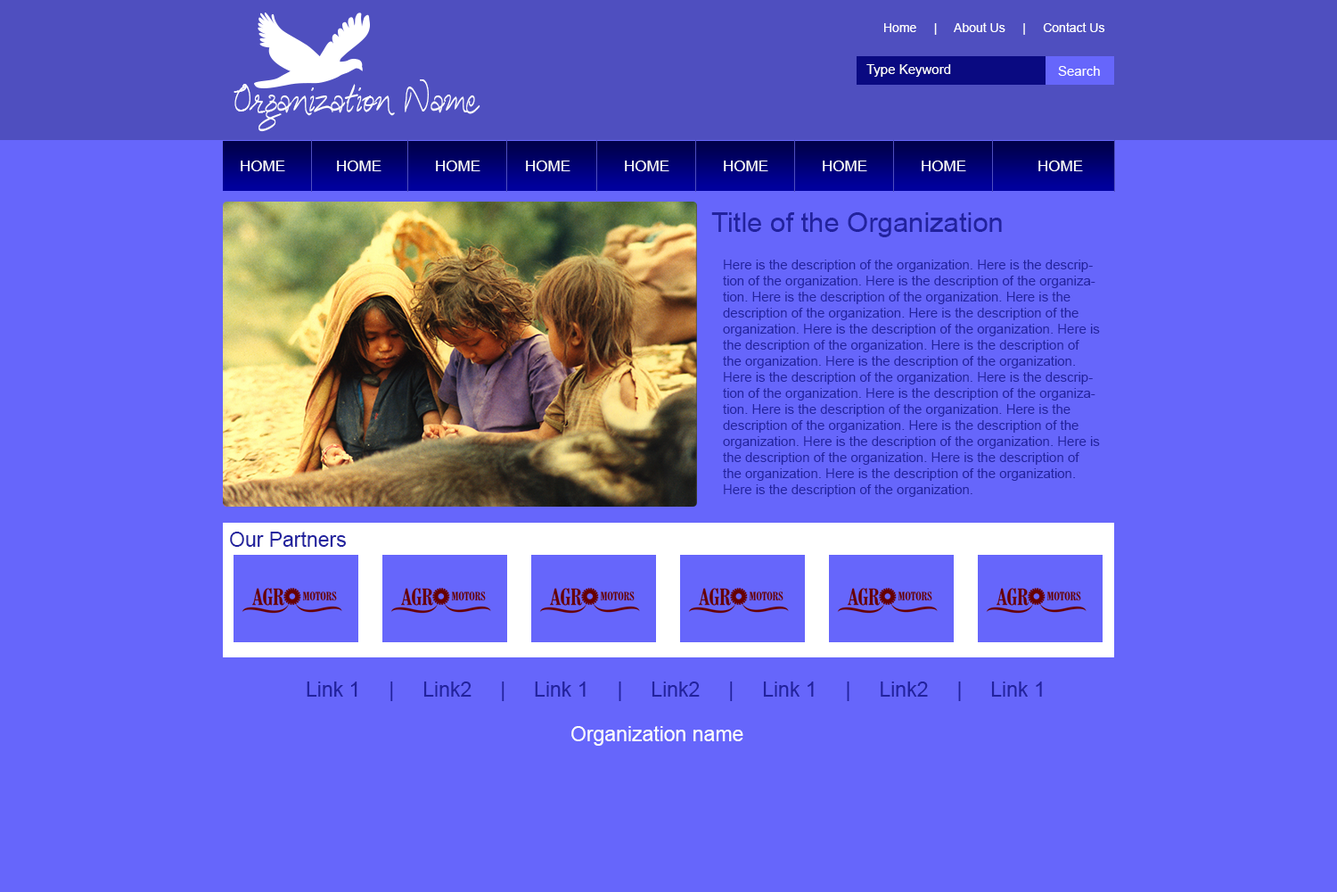
<style>
.page{position:relative;width:1337px;height:892px;background:#6666fb}
.page>*{position:absolute;margin:0}
.t1{font:12.5px "ArialMT";color:#fefefe}
.t2{font:13.4px "ArialMT";color:#fefefe}
.t3{font:32.1px "AnandaHastakchyar";color:#fefefe}
.t4{font:15.2px "ArialMT";color:#fefefe}
.t5{font:27.6px "ArialMT";color:#22229e}
.t6{font:13.4px "ArialMT";color:#22229e}
.t7{font:20.5px "ArialMT";color:#22229e}
.t8{font:20.5px "ArialMT";color:#fafafb}
</style>
<div class="page">
<p class="t1" style="left:884px;top:22px;width:222px;height:13px">Home     |     About Us     |     Contact Us</p>
<p class="t2" style="left:867px;top:64px;width:84px;height:13px">Type Keyword</p>
<p class="t2" style="left:1058px;top:66px;width:42px;height:10px">Search</p>
<p class="t3" style="left:234px;top:79px;width:247px;height:53px">Organization Name</p>
<p class="t4" style="left:241px;top:160px;width:44px;height:11px">HOME</p>
<p class="t4" style="left:337px;top:160px;width:45px;height:11px">HOME</p>
<p class="t4" style="left:436px;top:160px;width:45px;height:11px">HOME</p>
<p class="t4" style="left:526px;top:160px;width:45px;height:11px">HOME</p>
<p class="t4" style="left:625px;top:160px;width:45px;height:11px">HOME</p>
<p class="t4" style="left:724px;top:160px;width:45px;height:11px">HOME</p>
<p class="t4" style="left:823px;top:160px;width:45px;height:11px">HOME</p>
<p class="t4" style="left:922px;top:160px;width:44px;height:11px">HOME</p>
<p class="t4" style="left:1039px;top:160px;width:44px;height:11px">HOME</p>
<p class="t5" style="left:711px;top:212px;width:291px;height:25px">Title of the Organization</p>
<p class="t6" style="left:723px;top:259px;width:377px;height:238px">Here is the description of the organization. Here is the description of the organization. Here is the description of the organization. Here is the description of the organization. Here is the description of the organization. Here is the description of the organization. Here is the description of the organization. Here is the description of the organization. Here is the description of the organization. Here is the description of the organization. Here is the description of the organization. Here is the description of the organization. Here is the description of the organization. Here is the description of the organization. Here is the description of the organization. Here is the description of the organization. Here is the description of the organization. Here is the description of the organization. Here is the description of the organization. Here is the description of the organization. Here is the description of the organization.</p>
<p class="t7" style="left:230px;top:531px;width:116px;height:16px">Our Partners</p>
<p class="t7" style="left:307px;top:681px;width:735px;height:20px">Link 1     |     Link2     |     Link 1     |     Link2     |     Link 1     |     Link2     |     Link 1</p>
<p class="t8" style="left:572px;top:726px;width:172px;height:19px">Organization name</p>
</div>
